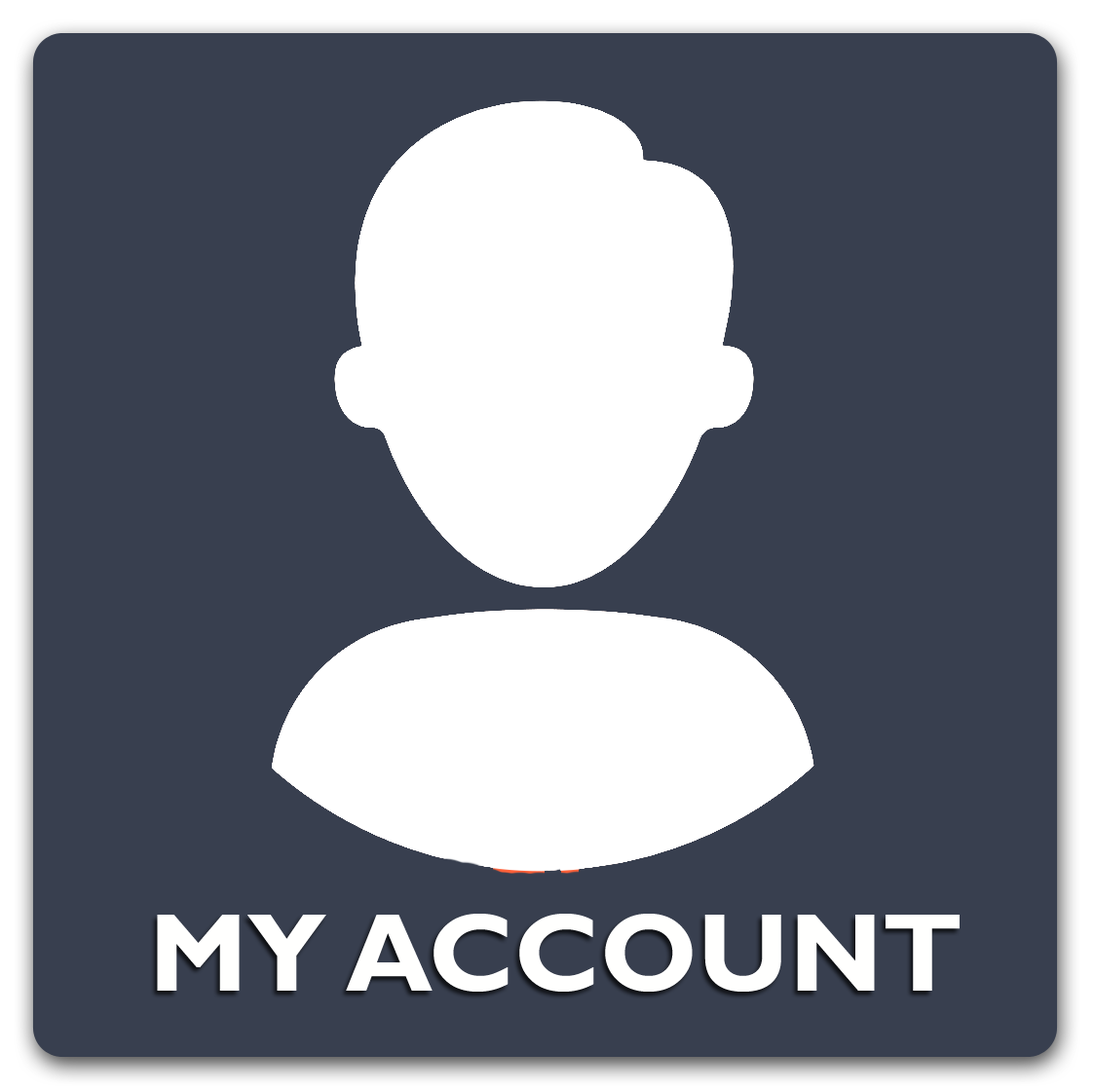
<style>
.page{position:relative;width:1094px;height:1090px;background:#383f4f}
.page>*{position:absolute;margin:0}
.t1{font:111.2px "GillSansMT-Bold";color:#fffffe}
</style>
<div class="page">
<p class="t1" style="left:157px;top:914px;width:803px;height:78px">MY ACCOUNT</p>
</div>
